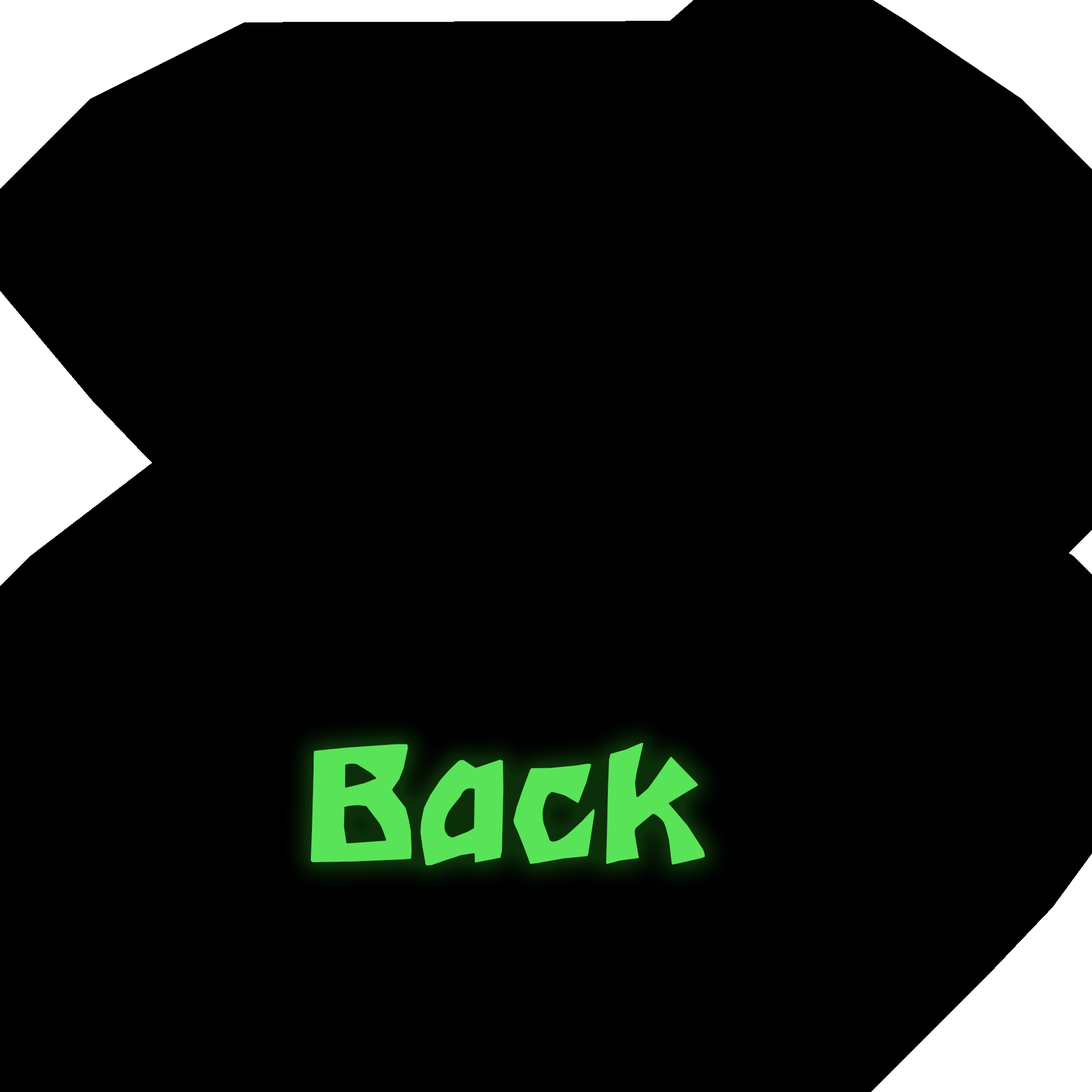
<style>
.page{position:relative;width:1092px;height:1092px;background:#000000}
.page>*{position:absolute;margin:0}
.t1{font:160px "Tarzan";color:#59e359}
</style>
<div class="page">
<p class="t1" style="left:310px;top:743px;width:395px;height:122px">Back</p>
</div>
